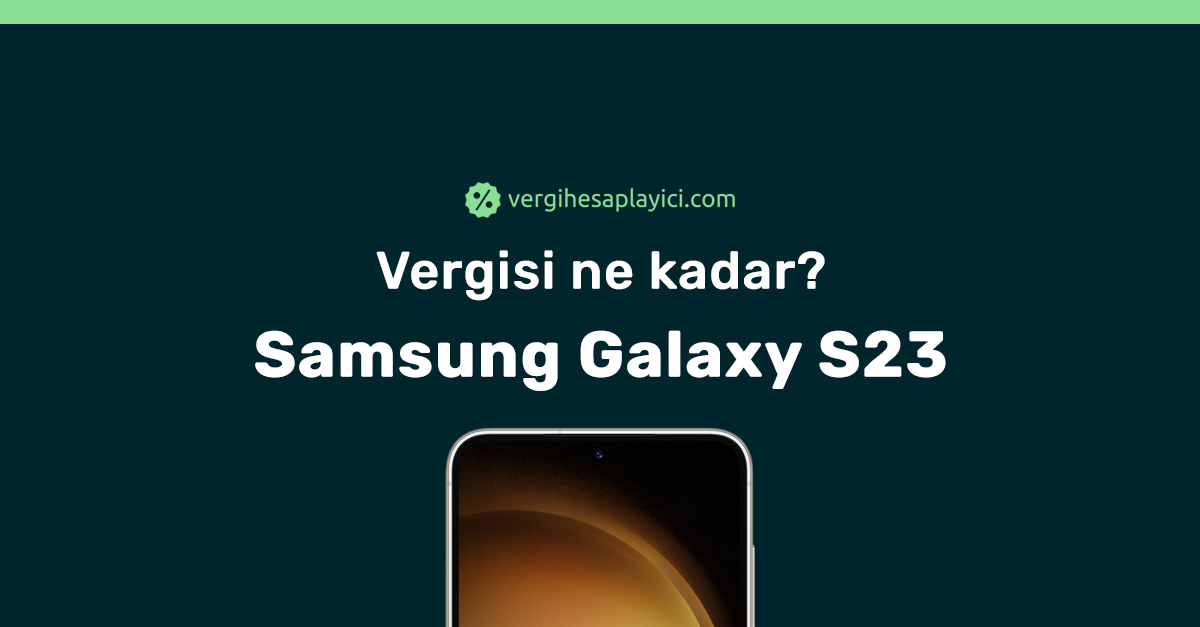
<style>
.page{position:relative;width:1200px;height:627px;background:#01252c}
.page>*{position:absolute;margin:0}
.t1{font:64px/88px "Rubik-Bold";color:#ffffff;font-weight:bold}
.t2{font:52px/88px "Rubik-Medium";color:#ffffff;font-weight:bold}
</style>
<div class="page">
<p class="t1" style="left:255px;top:250px;width:691px;height:141px;text-align:center"><span class="t2">Vergisi ne kadar?<br></span>Samsung Galaxy S23</p>
</div>
